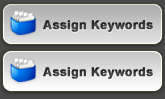
<style>
.page{position:relative;width:165px;height:99px}
.page>*{position:absolute;margin:0}
.t1{font:12px "Arial-BoldMT";letter-spacing:0.025em;color:#393939;font-weight:bold}
</style>
<div class="page">
<p class="t1" style="left:43px;top:20px;width:110px;height:12px">Assign Keywords</p>
<p class="t1" style="left:43px;top:67px;width:110px;height:12px">Assign Keywords</p>
</div>
